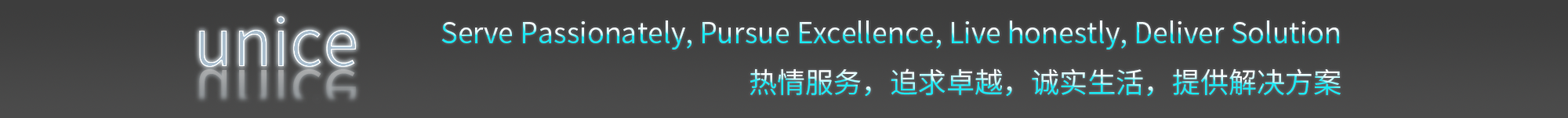
<style>
.page{position:relative;width:1568px;height:118px}
.page>*{position:absolute;margin:0}
.t1{font:65px "SourceHanSansCN-Normal"}
.t2{font:28.2px "SourceHanSansCN-Normal"}
</style>
<div class="page">
<p class="t1" style="left:199px;top:16px;width:157px;height:51px">unice</p>
<p class="t2" style="left:441px;top:20px;width:900px;height:76px;text-align:right">Serve Passionately, Pursue Excellence, Live honestly, Deliver Solution<br>热情服务，追求卓越，诚实生活，提供解决方案</p>
</div>
